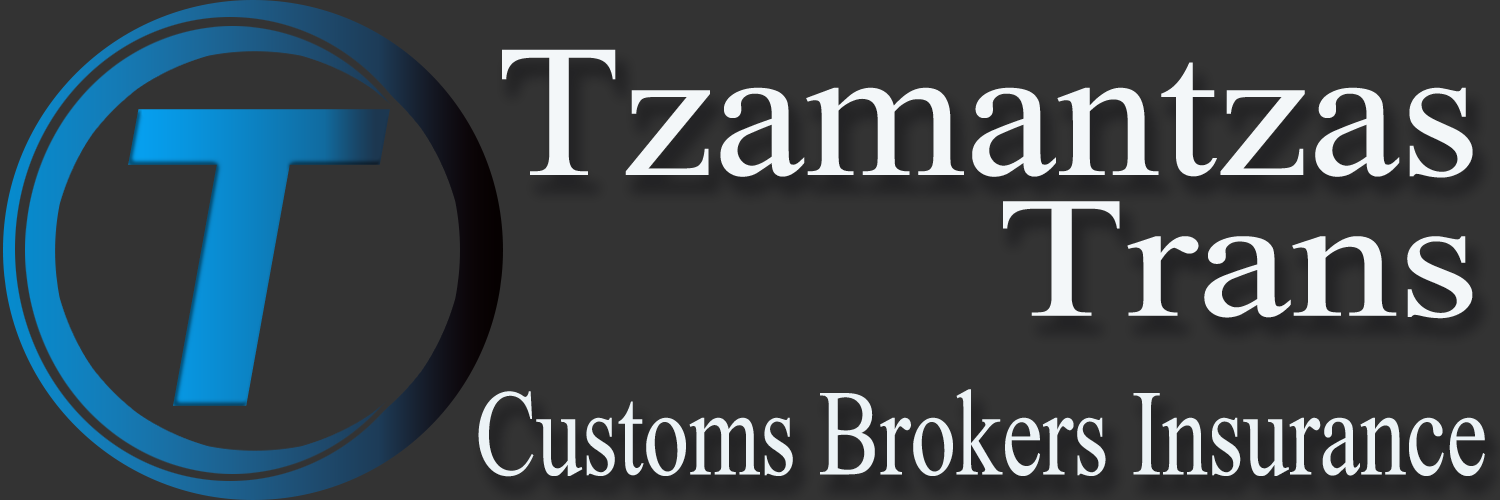
<style>
.page{position:relative;width:1500px;height:500px;background:#333333}
.page>*{position:absolute;margin:0}
.t1{font:281.7px "Microsoft-Himalaya";color:#f3f7f9;scale:1.09 1}
.t2{font:257.3px "Microsoft-Himalaya";color:#f3f7f9;scale:1.23 1}
.t3{font:182.6px "Microsoft-Himalaya";color:#ecf3f6;scale:0.75 1}
</style>
<div class="page">
<p class="t1" style="left:502px;top:49px;width:971px;height:129px">Tzamantzas</p>
<p class="t2" style="left:1003px;top:201px;width:470px;height:118px">Trans</p>
<p class="t3" style="left:478px;top:389px;width:1007px;height:88px">Customs Brokers Insurance</p>
</div>
